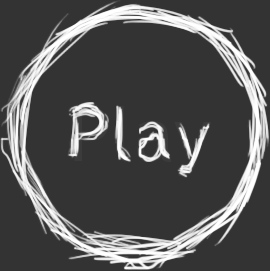
<style>
.page{position:relative;width:270px;height:271px;background:#333333}
.page>*{position:absolute;margin:0}
.t1{font:75px "TrebuchetMS"}
</style>
<div class="page">
<p class="t1" style="left:74px;top:106px;width:137px;height:70px">Play</p>
</div>
